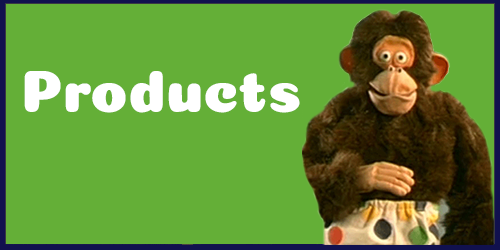
<style>
.page{position:relative;width:500px;height:250px;background:#64af37}
.page>*{position:absolute;margin:0}
.t1{font:60px "Coiny-Regular";color:#ffffff}
</style>
<div class="page">
<p class="t1" style="left:24px;top:71px;width:276px;height:42px">Products</p>
</div>
